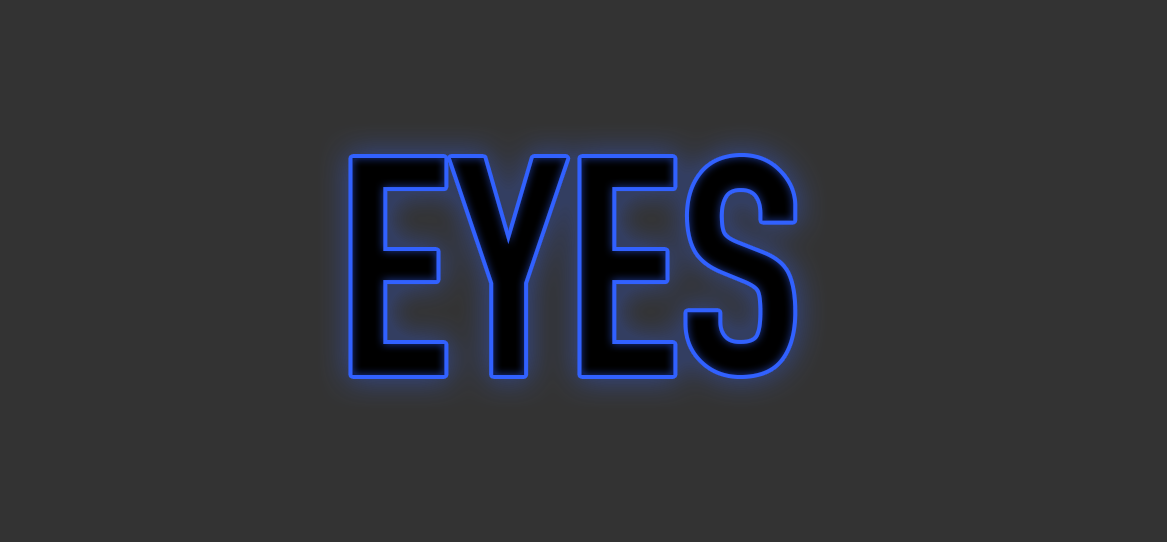
<style>
.page{position:relative;width:1167px;height:542px;background:#333333}
.page>*{position:absolute;margin:0}
.t1{font:302.5px "DINEngschrift";color:#010205}
</style>
<div class="page">
<p class="t1" style="left:352px;top:157px;width:442px;height:218px">EYES</p>
</div>
